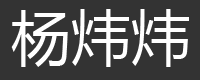
<style>
.page{position:relative;width:200px;height:80px;background:#333333}
.page>*{position:absolute;margin:0}
.t1{font:60px "MicrosoftYaHei";color:#ffffff}
</style>
<div class="page">
<p class="t1" style="left:11px;top:9px;width:178px;height:58px">杨炜炜</p>
</div>
